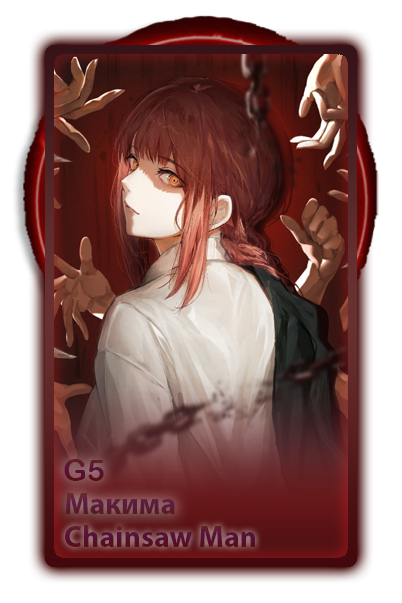
<style>
.page{position:relative;width:402px;height:603px}
.page>*{position:absolute;margin:0}
.t1{font:30px "ArialRoundedMTBold";color:#58112d}
.t2{font:30px "MyriadPro-Bold";color:#5c1b39}
.t3{font:30px "MyriadPro-Bold";color:#580f2f}
</style>
<div class="page">
<p class="t1" style="left:64px;top:459px;width:40px;height:22px">G5</p>
<p class="t2" style="left:65px;top:493px;width:110px;height:21px">Макима</p>
<p class="t3" style="left:65px;top:525px;width:190px;height:22px">Chainsaw Man</p>
</div>
